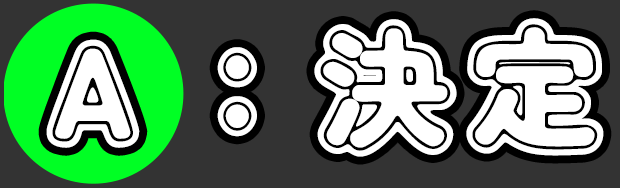
<style>
.page{position:relative;width:620px;height:188px;background:#333333}
.page>*{position:absolute;margin:0}
.t1{font:150px "DokiDokiFantasia";color:#ffffff}
</style>
<div class="page">
<p class="t1" style="left:217px;top:18px;width:387px;height:139px">：決定</p>
</div>
